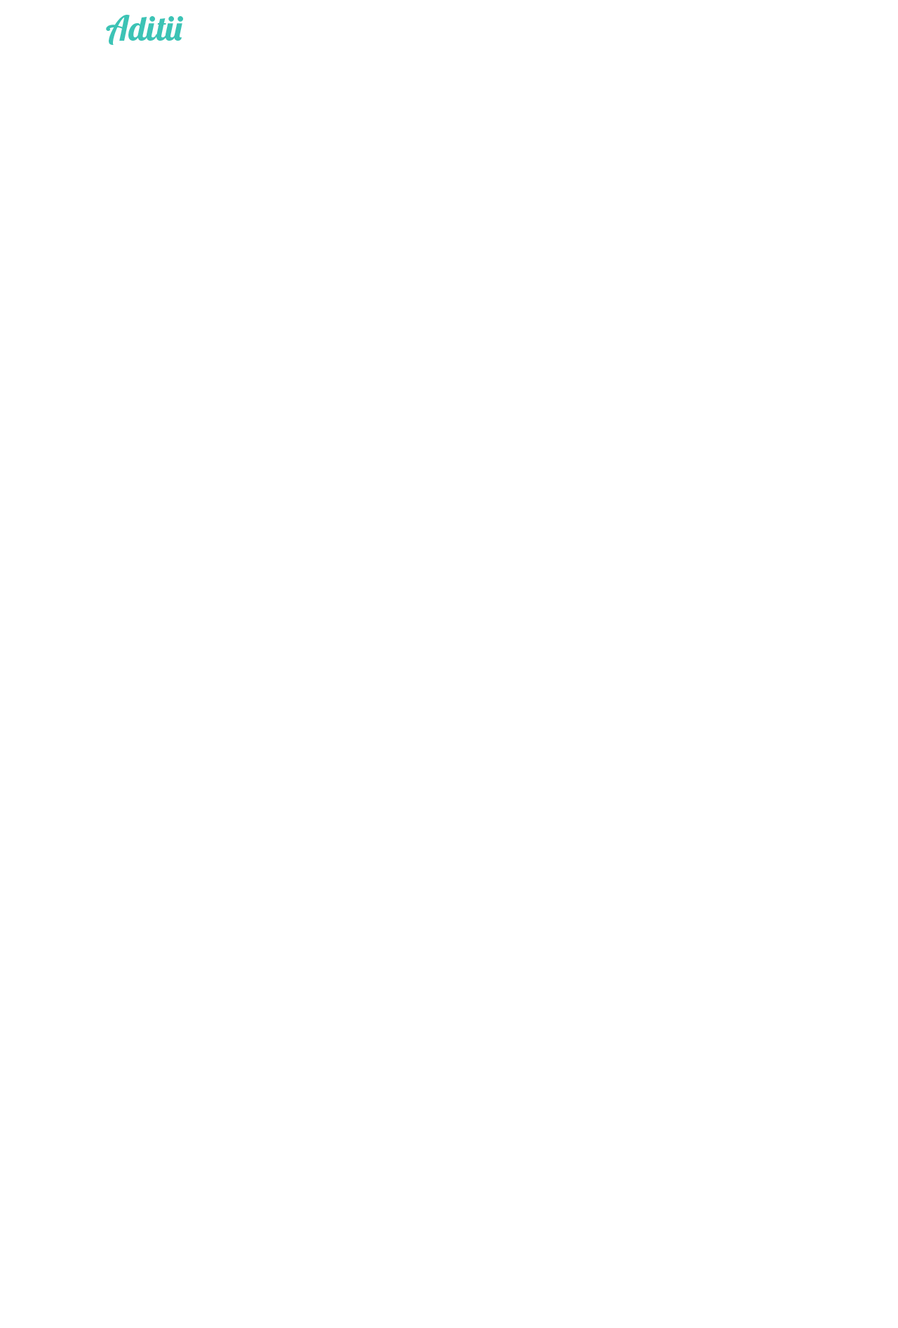
<style>
.page{position:relative;width:898px;height:1328px;background:#ffffff}
.page>*{position:absolute;margin:0}
.t1{font:34.4px "Lobster1.4";color:#3cc3b5}
</style>
<div class="page">
<p class="t1" style="left:106px;top:15px;width:77px;height:30px">Aditii</p>
</div>
